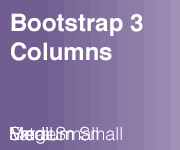
<style>
.page{position:relative;width:180px;height:150px;background:#725d91}
.page>*{position:absolute;margin:0}
.t1{font:24px "Helvetica-Bold";color:#ffffff}
.t2{font:18px "Helvetica-Light";color:#ffffff}
</style>
<div class="page">
<p class="t1" style="left:11px;top:13px;width:132px;height:48px">Bootstrap 3<br>Columns</p>
<p class="t2" style="left:10px;top:126px;width:88px;height:15px">Extra Small</p>
<p class="t2" style="left:10px;top:126px;width:112px;height:15px">Medium Small</p>
<p class="t2" style="left:10px;top:126px;width:42px;height:15px">Small</p>
<p class="t2" style="left:10px;top:127px;width:63px;height:14px">Medium</p>
<p class="t2" style="left:10px;top:127px;width:46px;height:17px">Large</p>
</div>
